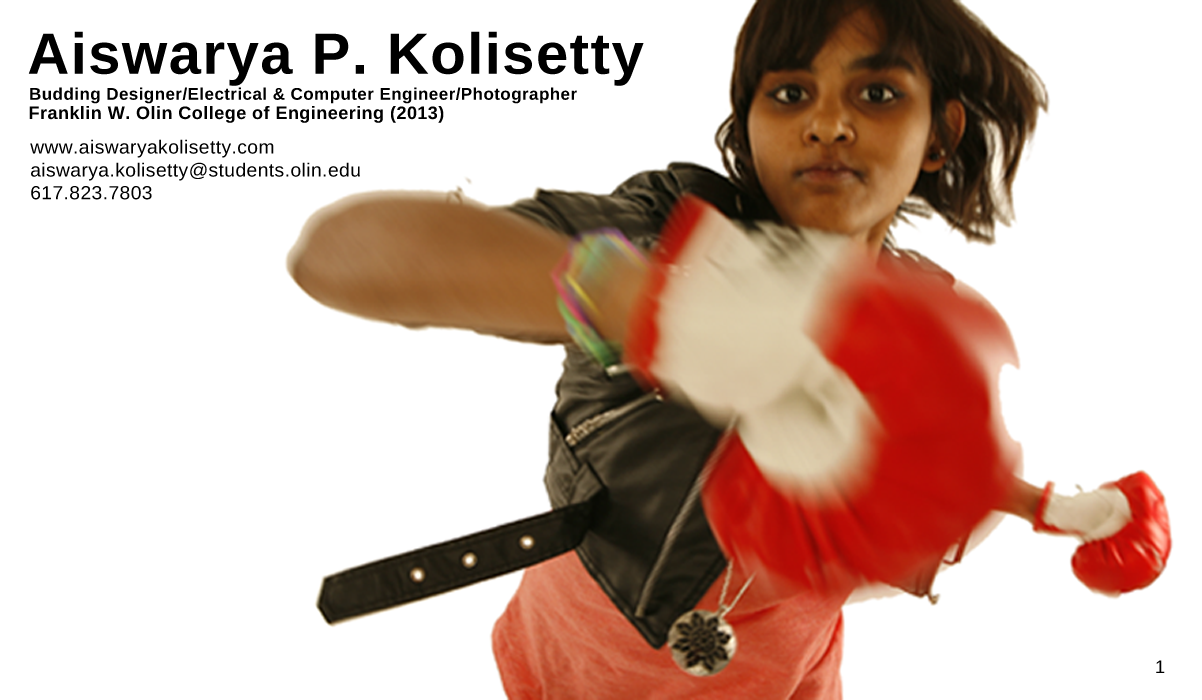
<style>
.page{position:relative;width:1202px;height:700px;background:#ffffff}
.page>*{position:absolute;margin:0}
.t1{font:58px "LiberationSans-Bold";letter-spacing:0.025em;color:#000000}
.t2{font:17px "LiberationSans-Bold";letter-spacing:0.025em;color:#000000}
.t3{font:18px "LiberationSans-Bold";letter-spacing:0.025em;color:#000000}
.t4{font:19.1px "LiberationSans";letter-spacing:0.025em;color:#000000}
.t5{font:18px "LiberationSans";letter-spacing:0.025em;color:#000000}
</style>
<div class="page">
<p class="t1" style="left:28px;top:31px;width:616px;height:55px">Aiswarya P. Kolisetty</p>
<p class="t2" style="left:30px;top:87px;width:547px;height:17px">Budding Designer/Electrical &amp; Computer Engineer/Photographer</p>
<p class="t3" style="left:29px;top:106px;width:415px;height:17px">Franklin W. Olin College of Engineering (2013)</p>
<p class="t4" style="left:30px;top:139px;width:330px;height:61px">www.aiswaryakolisetty.com<br>aiswarya.kolisetty@students.olin.edu<br>617.823.7803</p>
<p class="t5" style="left:1156px;top:660px;width:9px;height:13px">1</p>
</div>
